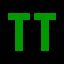
<style>
.page{position:relative;width:64px;height:64px;background:#000000}
.page>*{position:absolute;margin:0}
.t1{font:52px "Iosevka-Heavy";color:#009900}
</style>
<div class="page">
<p class="t1" style="left:8px;top:13px;width:48px;height:38px">TT</p>
</div>
